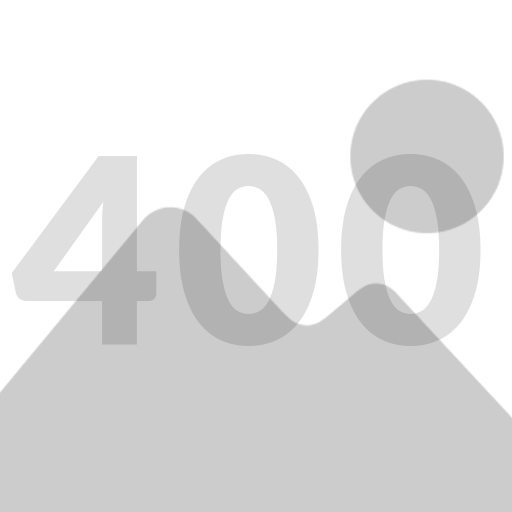
<style>
.page{position:relative;width:512px;height:512px;background:#cccccc}
.page>*{position:absolute;margin:0}
.t1{font:258.4px "Lato-Black";letter-spacing:0.05em}
</style>
<div class="page">
<p class="t1" style="left:11px;top:154px;width:470px;height:192px">400</p>
</div>
